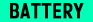
<style>
.page{position:relative;width:93px;height:22px;background:#00ffb7}
.page>*{position:absolute;margin:0}
.t1{font:21.3px "Monofonto-Regular";color:#000000}
</style>
<div class="page">
<p class="t1" style="left:10px;top:3px;width:74px;height:16px">BATTERY</p>
</div>
